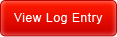
<style>
.page{position:relative;width:117px;height:37px}
.page>*{position:absolute;margin:0}
.t1{font:12.2px "ArialMT";letter-spacing:0.04em;color:#ffffff}
</style>
<div class="page">
<p class="t1" style="left:14px;top:13px;width:89px;height:11px">View Log Entry</p>
</div>
